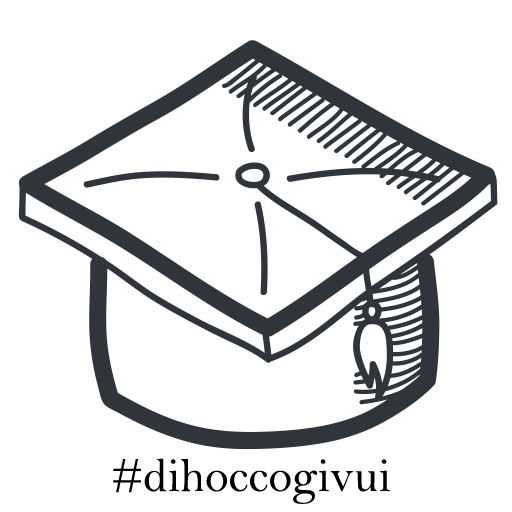
<style>
.page{position:relative;width:512px;height:512px;background:#ffffff}
.page>*{position:absolute;margin:0}
.t1{font:48px "BellMT";color:#000000}
</style>
<div class="page">
<p class="t1" style="left:113px;top:458px;width:278px;height:46px">#dihoccogivui</p>
</div>
